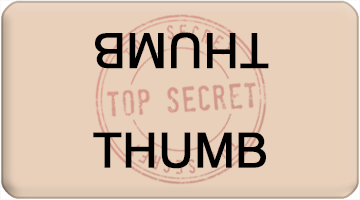
<style>
.page{position:relative;width:360px;height:200px;background:#e8d0bb}
.page>*{position:absolute;margin:0}
.t1{font:48px "ArialMT";color:#000000;font-weight:bold}
</style>
<div class="page">
<p class="t1" style="left:95px;top:32px;width:174px;height:37px;rotate:180deg">THUMB</p>
<p class="t1" style="left:93px;top:132px;width:173px;height:37px">THUMB</p>
</div>
